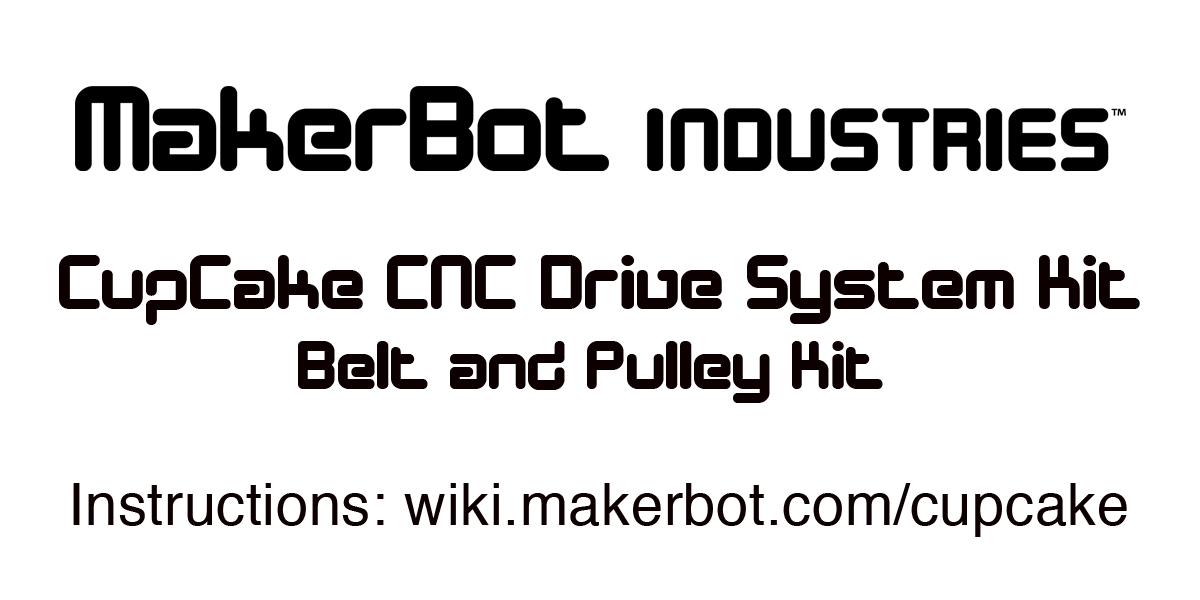
<style>
.page{position:relative;width:1200px;height:600px;background:#ffffff}
.page>*{position:absolute;margin:0}
.t1{font:79.1px "DesignerBlock";letter-spacing:0.01em;color:#0c0000}
.t2{font:70.9px "DesignerBlock";letter-spacing:0.01em;color:#0c0000}
.t3{font:57.9px "Helvetica";letter-spacing:0.01em;color:#0c0000}
</style>
<div class="page">
<p class="t1" style="left:59px;top:255px;width:1081px;height:70px">CupCake CNC Drive System Kit</p>
<p class="t2" style="left:298px;top:341px;width:585px;height:62px">Belt and Pulley Kit</p>
<p class="t3" style="left:73px;top:483px;width:1054px;height:54px">Instructions: wiki.makerbot.com/cupcake</p>
</div>
